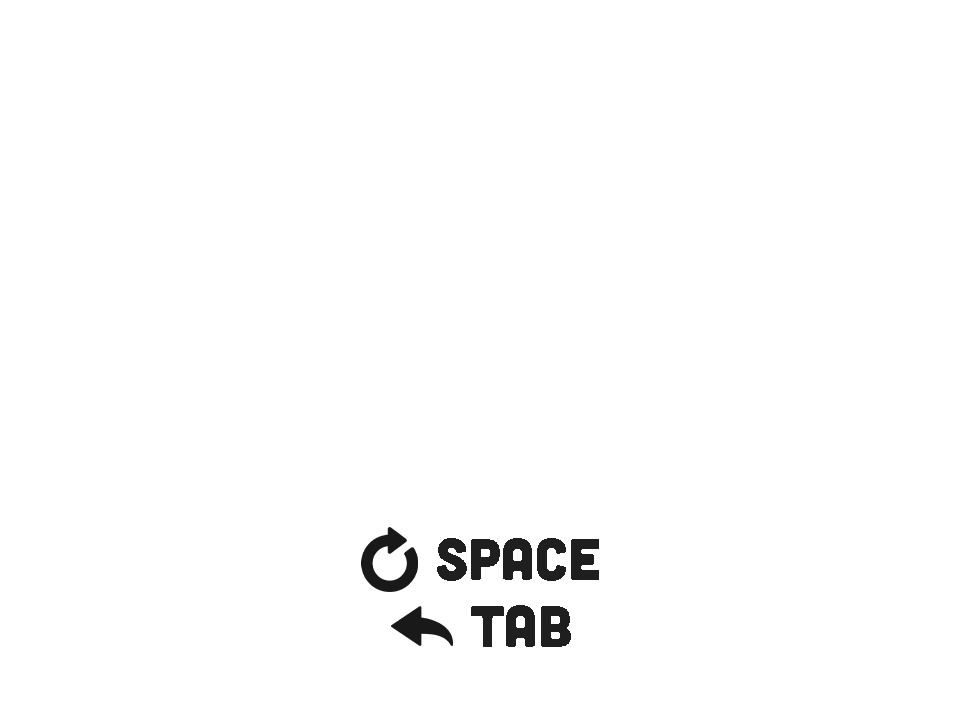
<style>
.page{position:relative;width:960px;height:720px;background:#ffffff}
.page>*{position:absolute;margin:0}
.t1{font:58.3px "Cubano-Regular";color:#1f1f1f}
</style>
<div class="page">
<p class="t1" style="left:437px;top:538px;width:162px;height:43px">Space</p>
<p class="t1" style="left:471px;top:605px;width:100px;height:42px">TAB</p>
</div>
